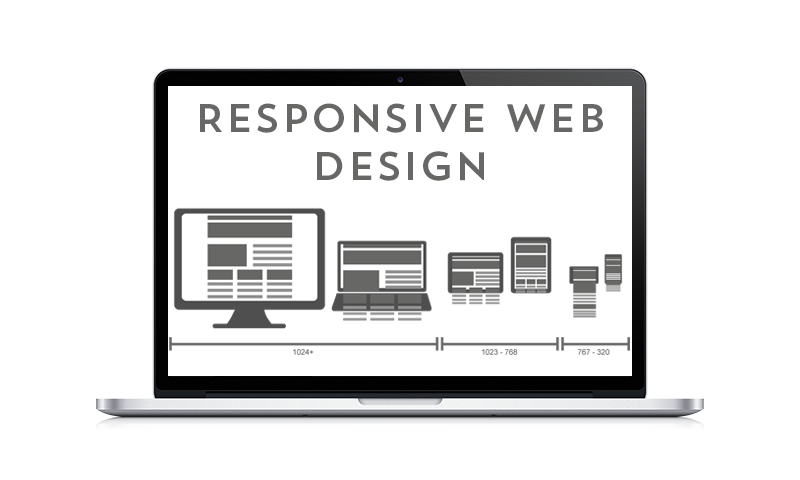
<style>
.page{position:relative;width:800px;height:480px;background:#ffffff}
.page>*{position:absolute;margin:0}
.t1{font:40px "TrendSansOne";color:#676766}
</style>
<div class="page">
<p class="t1" style="left:200px;top:103px;width:403px;height:78px;text-align:center">ResponsivE Web<br>Design</p>
</div>
